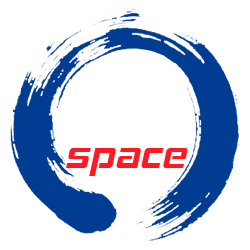
<style>
.page{position:relative;width:250px;height:250px;background:#ffffff}
.page>*{position:absolute;margin:0}
.t1{font:40px "HemiHeadRg-BoldItalic";color:#ff1923}
</style>
<div class="page">
<p class="t1" style="left:66px;top:148px;width:122px;height:28px">space</p>
</div>
